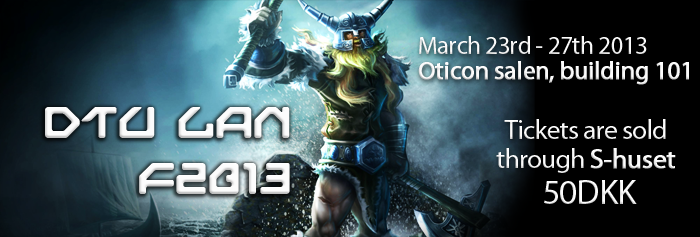
<style>
.page{position:relative;width:700px;height:237px;background:#000000}
.page>*{position:absolute;margin:0}
.t1{font:25.3px/24.7px "MyriadPro-Regular";letter-spacing:-0.025em;color:#fcfcfc;font-weight:bold}
.t2{font:25.3px/24.7px "MyriadPro-Regular";letter-spacing:-0.025em;color:#fcfcfc}
.t3{font:46.7px "NextGames";letter-spacing:-0.025em;color:#fcfcfc}
.t4{font:27.2px/29.2px "MyriadPro-Regular";letter-spacing:-0.025em;color:#fcfcfc}
.t5{font:27.2px/29.2px "MyriadPro-Regular";letter-spacing:-0.025em;color:#fcfcfc;font-weight:bold}
.t6{font:35px "MyriadPro-Regular";letter-spacing:-0.025em;color:#fcfcfc}
</style>
<div class="page">
<p class="t1" style="left:418px;top:36px;width:271px;height:49px"><span class="t2">March 23rd - 27th 2013<br></span>Oticon salen, building 101</p>
<p class="t3" style="left:45px;top:107px;width:245px;height:87px;text-align:right">DTU LAN<br>F2013</p>
<p class="t4" style="left:496px;top:119px;width:180px;height:54px;text-align:center">Tickets are sold<br>through <span class="t5">S-huset</span></p>
<p class="t6" style="left:544px;top:180px;width:93px;height:24px">50DKK</p>
</div>
